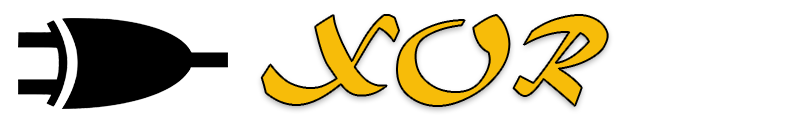
<style>
.page{position:relative;width:800px;height:120px;background:#ffffff}
.page>*{position:absolute;margin:0}
.t1{font:100px "MaturaMTScriptCapitals";color:#f7bc09}
</style>
<div class="page">
<p class="t1" style="left:261px;top:15px;width:347px;height:91px">XOR</p>
</div>
